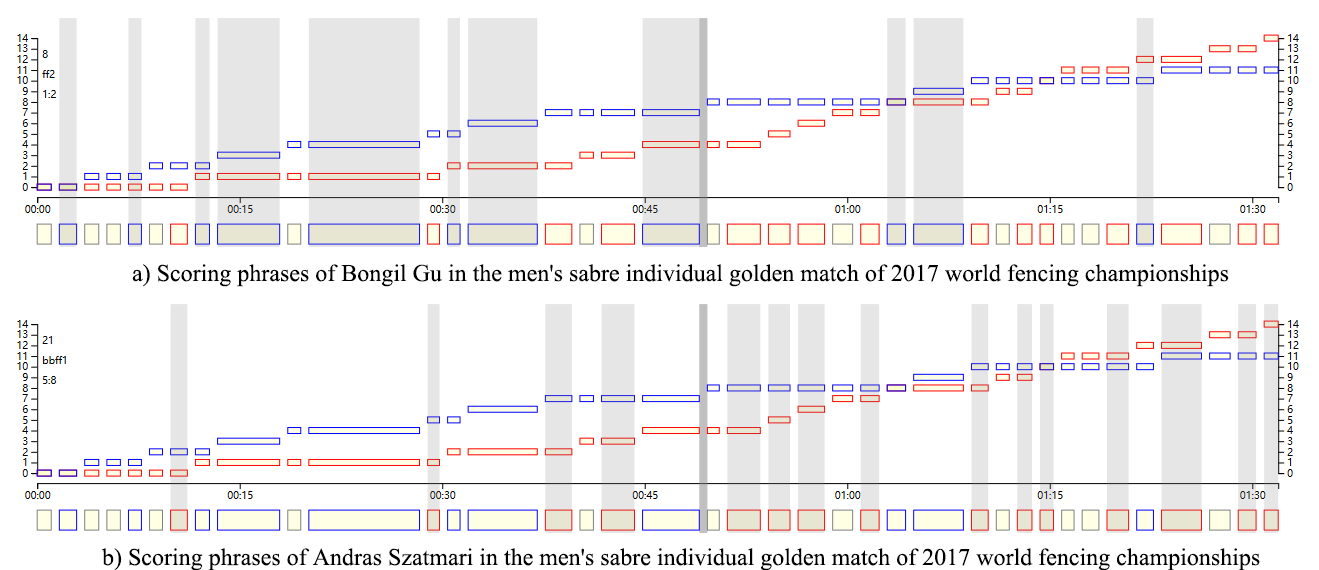
<style>
.page{position:relative;width:1319px;height:570px;background:#ffffff}
.page>*{position:absolute;margin:0}
.t1{font:24px "TimesNewRomanPSMT";color:#000000}
</style>
<div class="page">
<p class="t1" style="left:132px;top:264px;width:1097px;height:23px">a) Scoring phrases of Bongil Gu in the men's sabre individual golden match of 2017 world fencing championships</p>
<p class="t1" style="left:101px;top:548px;width:1159px;height:23px">b) Scoring phrases of Andras Szatmari in the men's sabre individual golden match of 2017 world fencing championships</p>
</div>
